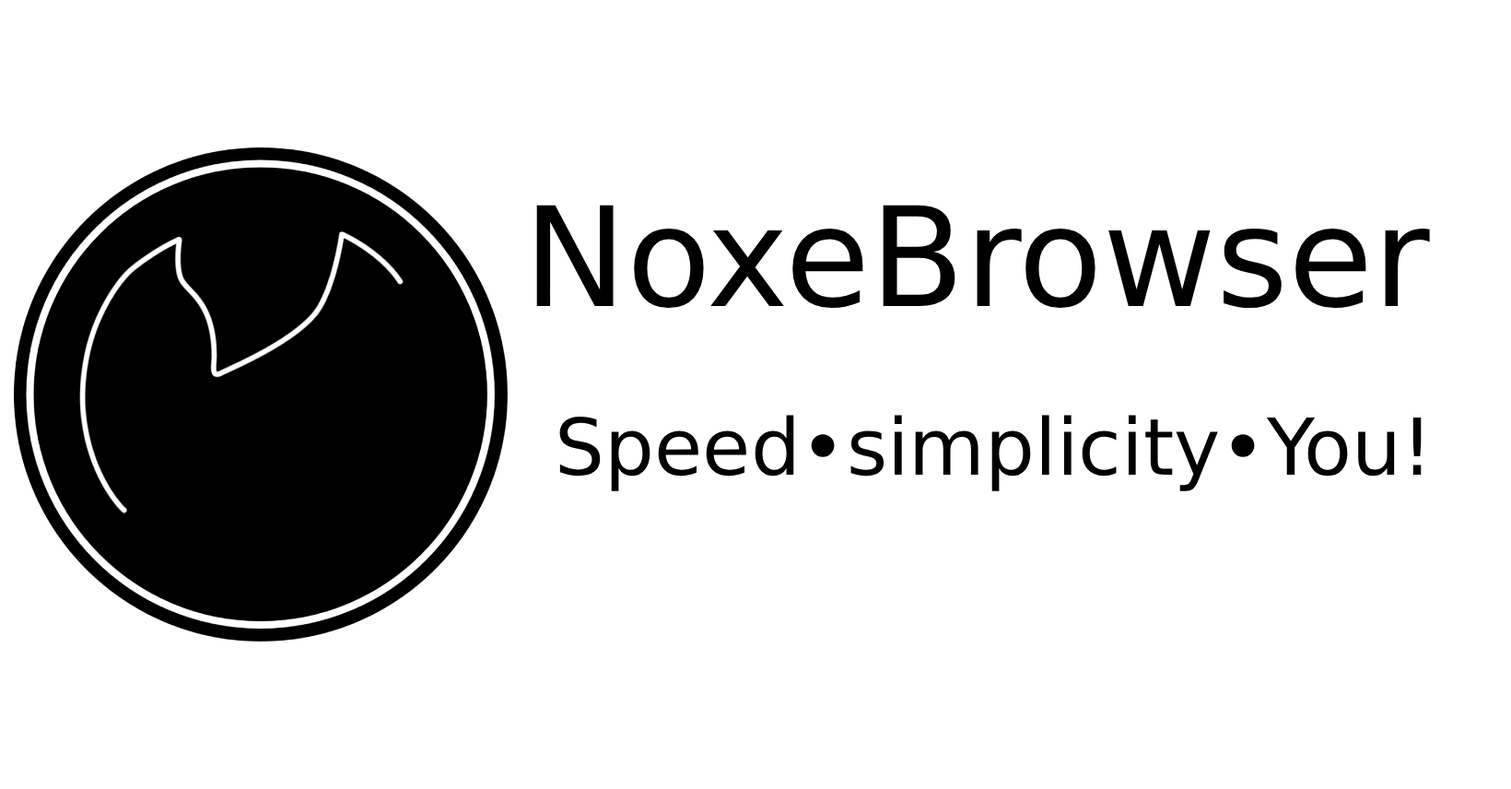
<style>
.page{position:relative;width:1511px;height:789px;background:#ffffff}
.page>*{position:absolute;margin:0}
.t1{font:138.2px "Counter-StrikeRegular";color:#000000}
.t2{font:78.3px "Counter-StrikeRegular";color:#000000}
</style>
<div class="page">
<p class="t1" style="left:536px;top:205px;width:894px;height:104px">NoxeBrowser</p>
<p class="t2" style="left:559px;top:415px;width:863px;height:76px">Speed•simplicity•You!</p>
</div>
